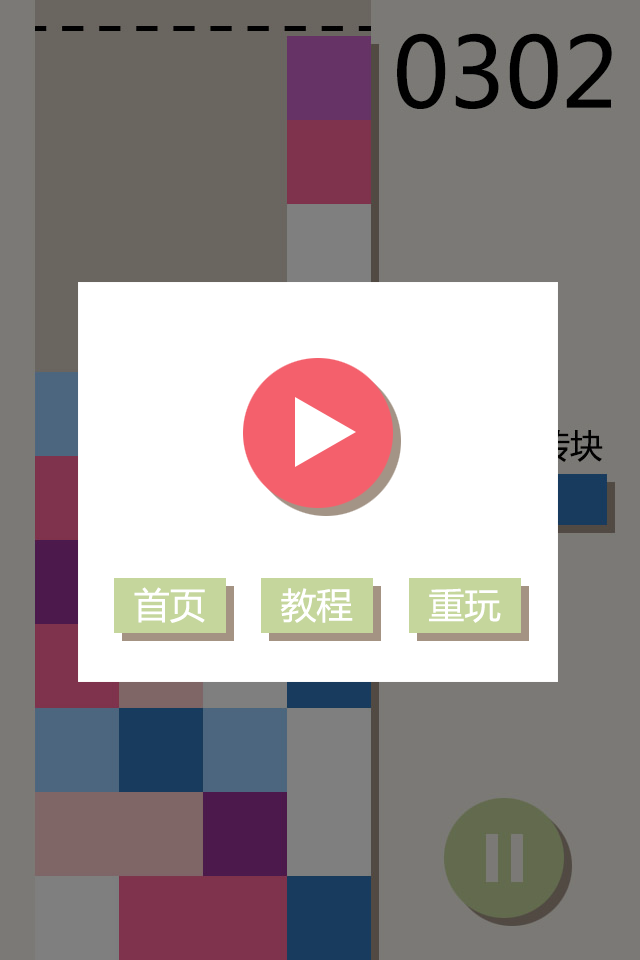
<style>
.page{position:relative;width:640px;height:960px;background:#7b7976}
.page>*{position:absolute;margin:0}
.t1{font:36px "MicrosoftYaHei";color:#ffffff}
</style>
<div class="page">
<p class="t1" style="left:134px;top:587px;width:71px;height:36px">首页</p>
<p class="t1" style="left:280px;top:588px;width:73px;height:35px">教程</p>
<p class="t1" style="left:429px;top:588px;width:72px;height:35px">重玩</p>
</div>
